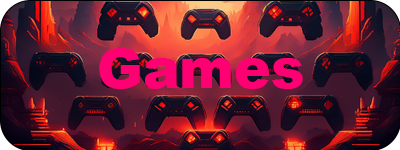
<style>
.page{position:relative;width:400px;height:150px}
.page>*{position:absolute;margin:0}
.t1{font:54.7px "Arial-Black";color:#ff0072}
</style>
<div class="page">
<p class="t1" style="left:99px;top:48px;width:204px;height:41px">Games</p>
</div>
